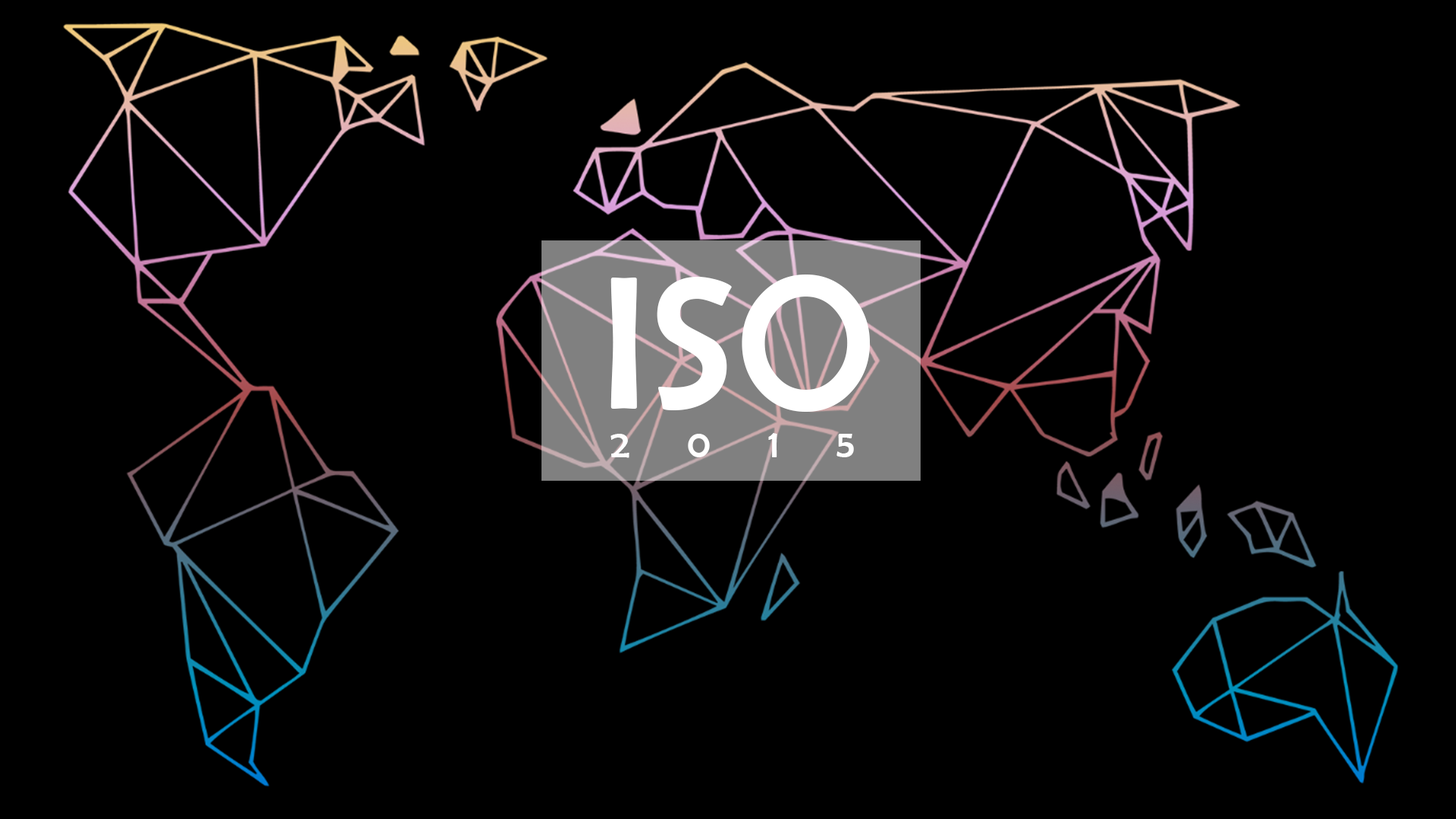
<style>
.page{position:relative;width:1456px;height:819px;background:#000000}
.page>*{position:absolute;margin:0}
.t1{font:191.7px "BerlinSansFB-Reg";color:#ffffff}
.t2{font:39.8px "BerlinSansFB-Reg";letter-spacing:1.44em;color:#ffffff}
</style>
<div class="page">
<p class="t1" style="left:610px;top:274px;width:261px;height:138px">ISO</p>
<p class="t2" style="left:610px;top:433px;width:244px;height:25px">2015</p>
</div>
